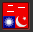
<style>
.page{position:relative;width:33px;height:32px;background:#f20000}
.page>*{position:absolute;margin:0}
.t1{font:10.4px "SimSun";color:#ffffff}
</style>
<div class="page">
<p class="t1" style="left:7px;top:5px;width:18px;height:7px">二一</p>
</div>
